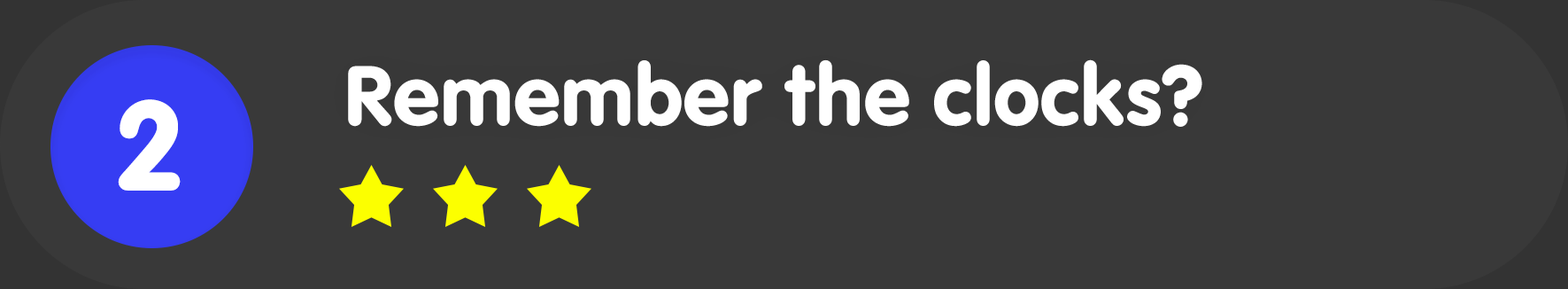
<style>
.page{position:relative;width:1568px;height:289px;background:#393939}
.page>*{position:absolute;margin:0}
.t1{font:88.5px "VAGRundschriftD";color:#ffffff}
.t2{font:132.8px "VAGRundschriftD";color:#ffffff}
</style>
<div class="page">
<p class="t1" style="left:348px;top:59px;width:854px;height:68px">Remember the clocks?</p>
<p class="t2" style="left:118px;top:99px;width:63px;height:91px">2</p>
</div>
